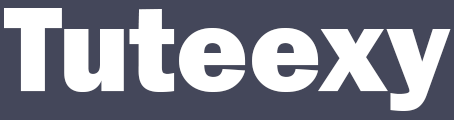
<style>
.page{position:relative;width:454px;height:120px;background:#44475a}
.page>*{position:absolute;margin:0}
.t1{font:123.7px "FranklinGothic-Heavy";color:#ffffff}
</style>
<div class="page">
<p class="t1" style="left:4px;top:8px;width:447px;height:103px">Tuteexy</p>
</div>
